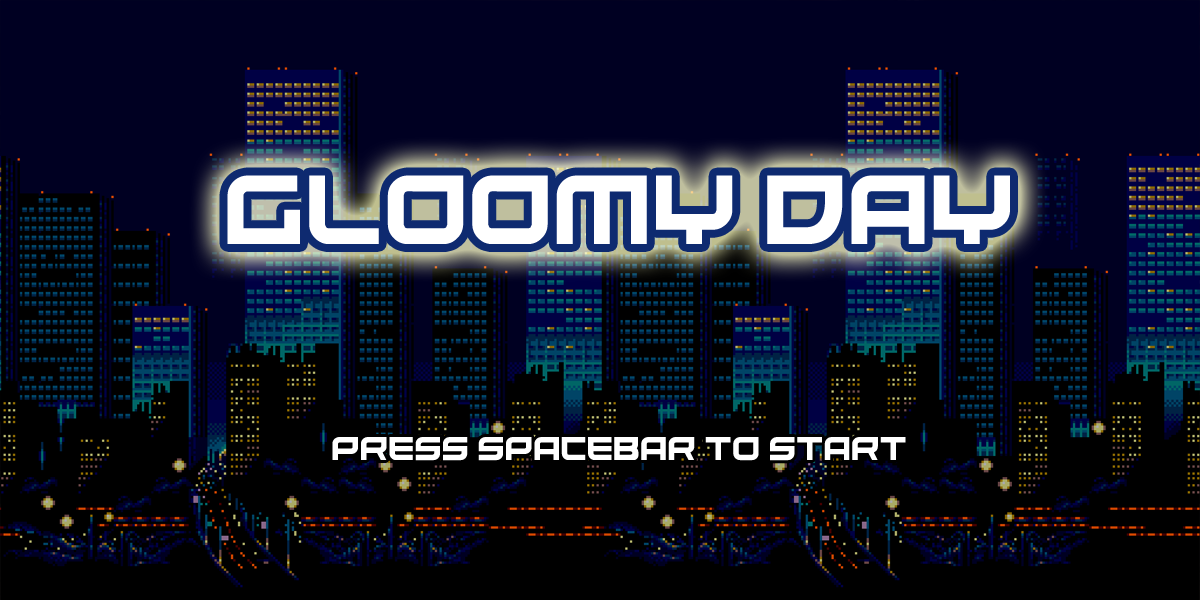
<style>
.page{position:relative;width:1200px;height:600px;background:#000000}
.page>*{position:absolute;margin:0}
.t1{font:96px "UnitedKingdom";color:#ffffff}
.t2{font:32px "UnitedKingdom";color:#ffffff}
</style>
<div class="page">
<p class="t1" style="left:227px;top:175px;width:783px;height:69px">Gloomy Day</p>
<p class="t2" style="left:332px;top:437px;width:574px;height:24px">Press Spacebar to start</p>
</div>
